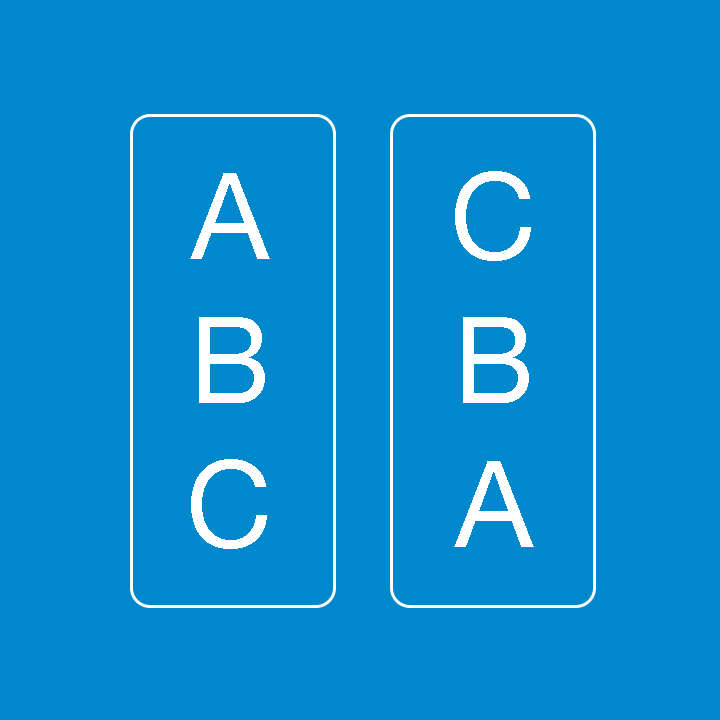
<style>
.page{position:relative;width:720px;height:720px;background:#0088cc}
.page>*{position:absolute;margin:0}
.t1{font:120px "HelveticaNeue";letter-spacing:-0.022em;color:#ffffff}
</style>
<div class="page">
<p class="t1" style="left:190px;top:173px;width:80px;height:376px;text-align:center">A<br>B<br>C</p>
<p class="t1" style="left:454px;top:171px;width:80px;height:376px;text-align:center">C<br>B<br>A</p>
</div>
